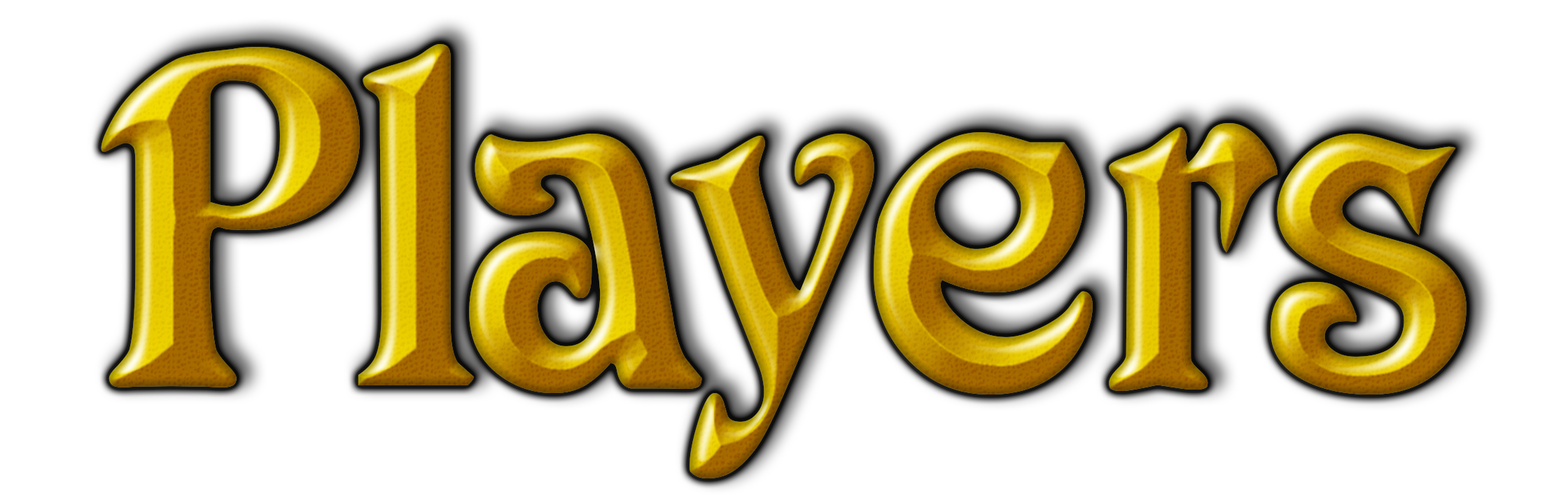
<style>
.page{position:relative;width:1568px;height:498px;background:#ffffff}
.page>*{position:absolute;margin:0}
.t1{font:472.2px "Avatar";letter-spacing:-0.01em}
.t2{font:472.2px "Avatar";letter-spacing:-0.05em}
.t3{font:472.2px "Avatar";letter-spacing:-0.03em}
.t4{font:472.2px "Avatar";letter-spacing:0.01em}
.t5{font:472.2px "Avatar";letter-spacing:0.05em}
</style>
<div class="page">
<p class="t1" style="left:101px;top:44px;width:1365px;height:435px">Pl<span class="t2">a</span><span class="t3">ye</span><span class="t4">r</span><span class="t5">s</span></p>
<p class="t1" style="left:101px;top:44px;width:1365px;height:435px">Pl<span class="t2">a</span><span class="t3">ye</span><span class="t4">r</span><span class="t5">s</span></p>
</div>
